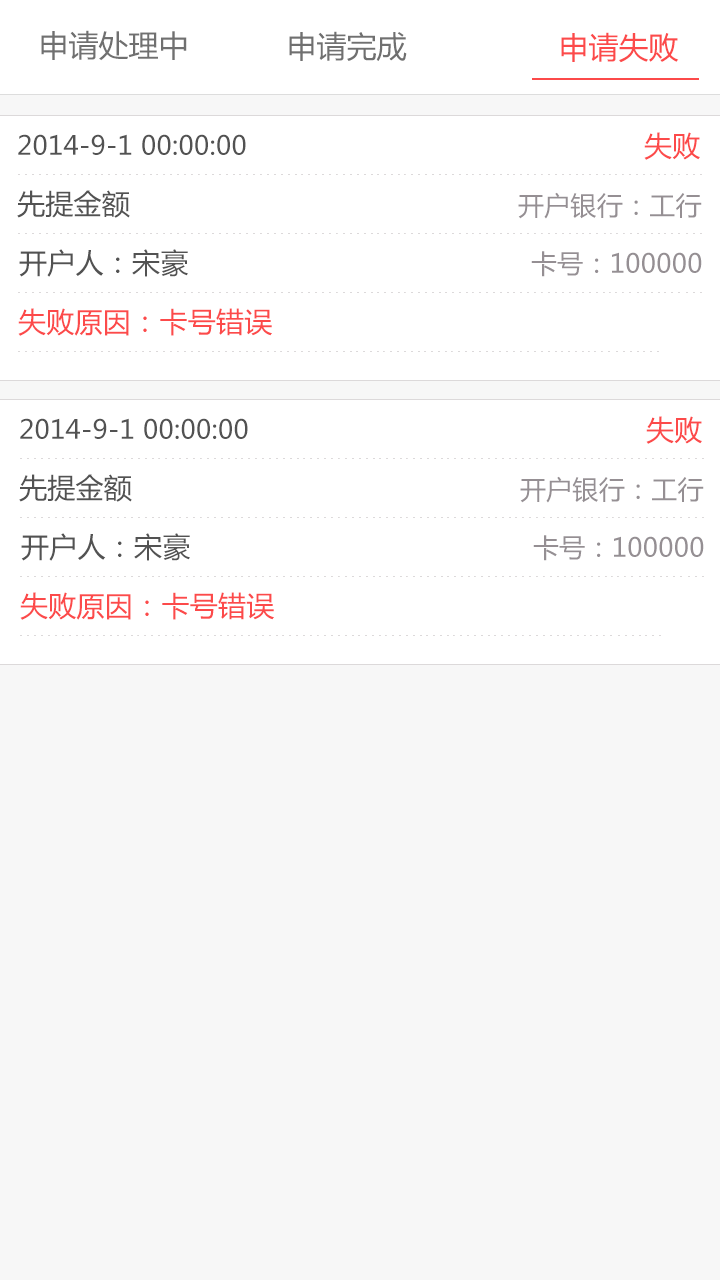
<style>
.page{position:relative;width:720px;height:1280px;background:#f7f7f7}
.page>*{position:absolute;margin:0}
.t1{font:30px "MicrosoftYaHei";color:#707070}
.t2{font:30px "MicrosoftYaHei";color:#fc4a4a}
.t3{font:26px "MicrosoftYaHei";letter-spacing:0.01em;color:#525252}
.t4{font:28px "MicrosoftYaHei";letter-spacing:0.01em;color:#fc4a4a}
.t5{font:28px "MicrosoftYaHei";letter-spacing:0.01em;color:#525252}
.t6{font:26px "MicrosoftYaHei";letter-spacing:0.01em;color:#958f93}
</style>
<div class="page">
<p class="t1" style="left:41px;top:30px;width:146px;height:31px">申请处理中</p>
<p class="t1" style="left:289px;top:31px;width:118px;height:30px">申请完成</p>
<p class="t2" style="left:561px;top:32px;width:118px;height:31px">申请失败</p>
<p class="t3" style="left:18px;top:134px;width:228px;height:21px">2014-9-1 00:00:00</p>
<p class="t4" style="left:644px;top:132px;width:56px;height:28px">失败</p>
<p class="t5" style="left:17px;top:190px;width:113px;height:28px">先提金额</p>
<p class="t6" style="left:518px;top:192px;width:184px;height:27px">开户银行：工行</p>
<p class="t5" style="left:19px;top:249px;width:169px;height:28px">开户人：宋豪</p>
<p class="t6" style="left:531px;top:251px;width:171px;height:26px">卡号：100000</p>
<p class="t4" style="left:18px;top:308px;width:254px;height:28px">失败原因：卡号错误</p>
<p class="t3" style="left:20px;top:418px;width:228px;height:21px">2014-9-1 00:00:00</p>
<p class="t4" style="left:646px;top:416px;width:56px;height:28px">失败</p>
<p class="t5" style="left:19px;top:474px;width:113px;height:28px">先提金额</p>
<p class="t6" style="left:520px;top:476px;width:184px;height:27px">开户银行：工行</p>
<p class="t5" style="left:21px;top:533px;width:169px;height:28px">开户人：宋豪</p>
<p class="t6" style="left:533px;top:535px;width:171px;height:26px">卡号：100000</p>
<p class="t4" style="left:20px;top:592px;width:254px;height:28px">失败原因：卡号错误</p>
</div>
